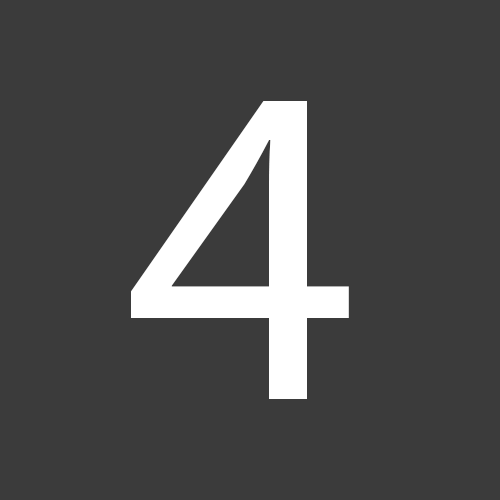
<style>
.page{position:relative;width:500px;height:500px;background:#3b3b3b}
.page>*{position:absolute;margin:0}
.t1{font:458.3px "MyriadPro-Regular";color:#ffffff}
</style>
<div class="page">
<p class="t1" style="left:131px;top:101px;width:218px;height:298px">4</p>
</div>
